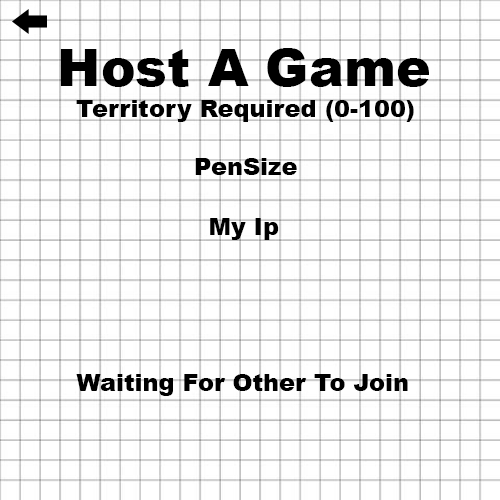
<style>
.page{position:relative;width:500px;height:500px;background:#ffffff}
.page>*{position:absolute;margin:0}
.t1{font:52.1px "Arial-Black";color:#000000}
.t2{font:24px "Arial-Black";color:#000000}
</style>
<div class="page">
<p class="t1" style="left:60px;top:48px;width:369px;height:39px">Host A Game</p>
<p class="t2" style="left:76px;top:100px;width:338px;height:22px">Territory Required (0-100)</p>
<p class="t2" style="left:195px;top:158px;width:102px;height:17px">PenSize</p>
<p class="t2" style="left:210px;top:218px;width:69px;height:22px">My Ip</p>
<p class="t2" style="left:76px;top:374px;width:332px;height:22px">Waiting For Other To Join</p>
</div>
